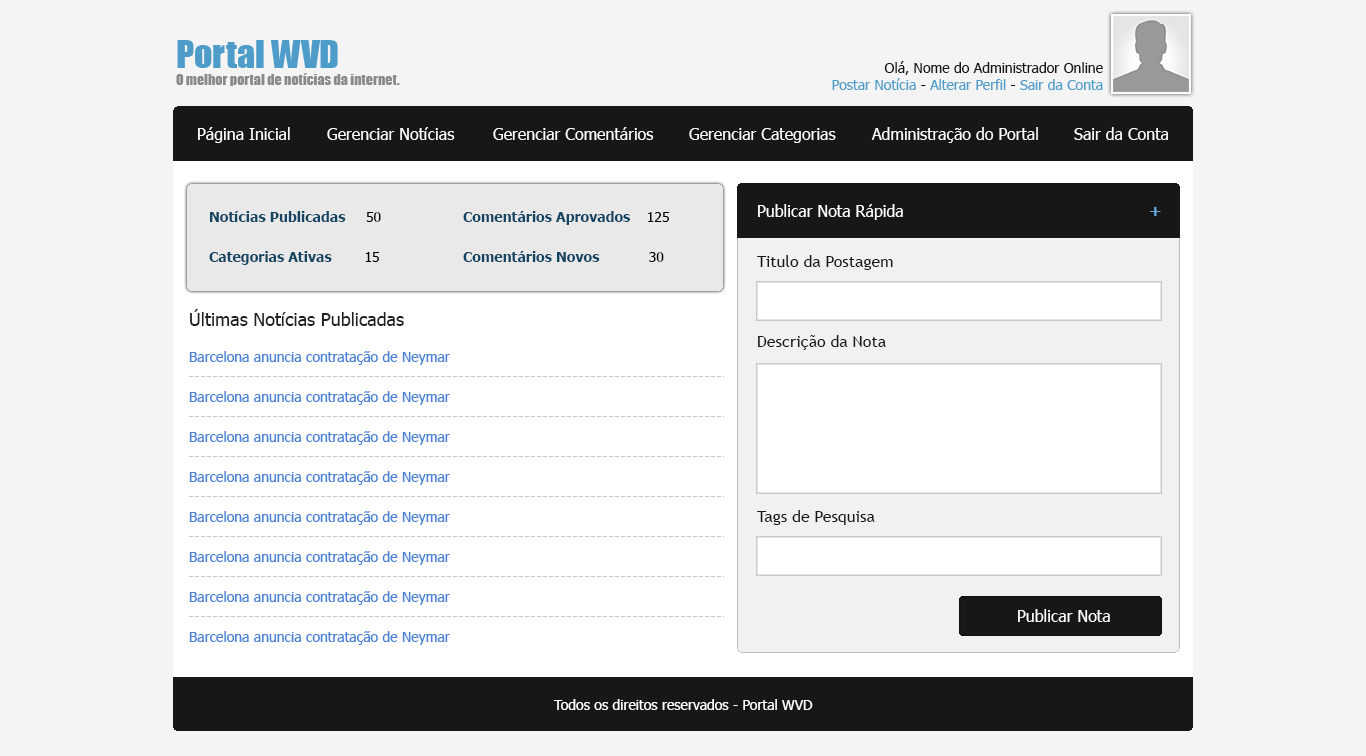
<style>
.page{position:relative;width:1366px;height:756px;background:#f4f4f4}
.page>*{position:absolute;margin:0}
.t1{font:14px "Tahoma";color:#171717}
.t2{font:14px "Tahoma";color:#4e9cc9}
.t3{font:14px "Tahoma";color:#000000}
.t4{font:16px "Tahoma";color:#ffffff}
.t5{font:16px "Tahoma-Bold";color:#64aade}
.t6{font:14px "Tahoma-Bold";color:#134562}
.t7{font:14px "Tahoma";color:#010101}
.t8{font:16px "TrebuchetMS";color:#171717}
.t9{font:18px "Tahoma";color:#202020}
.t10{font:14px "Tahoma";color:#ffffff}
</style>
<div class="page">
<p class="t1" style="left:832px;top:61px;width:271px;height:29px;text-align:right">Olá, Nome do Administrador Online<br><span class="t2">Postar Notícia </span><span class="t3">-</span><span class="t2"> Alterar Perfil </span><span class="t3">- </span><span class="t2">Sair da Conta</span></p>
<p class="t4" style="left:198px;top:127px;width:92px;height:16px">Página Inicial</p>
<p class="t4" style="left:327px;top:127px;width:128px;height:13px">Gerenciar Notícias</p>
<p class="t4" style="left:493px;top:127px;width:161px;height:13px">Gerenciar Comentários</p>
<p class="t4" style="left:689px;top:128px;width:147px;height:15px">Gerenciar Categorias</p>
<p class="t4" style="left:871px;top:127px;width:167px;height:16px">Administração do Portal</p>
<p class="t4" style="left:1074px;top:127px;width:94px;height:13px">Sair da Conta</p>
<p class="t4" style="left:758px;top:204px;width:403px;height:16px">Publicar Nota Rápida                                                 <span class="t5">+</span></p>
<p class="t6" style="left:210px;top:211px;width:171px;height:11px">Notícias Publicadas     <span class="t7">50</span></p>
<p class="t6" style="left:463px;top:211px;width:206px;height:14px">Comentários Aprovados    <span class="t3">125</span></p>
<p class="t6" style="left:209px;top:251px;width:170px;height:14px">Categorias Ativas        <span class="t3">15</span></p>
<p class="t6" style="left:463px;top:251px;width:201px;height:11px">Comentários Novos            <span class="t3">30</span></p>
<p class="t8" style="left:757px;top:255px;width:136px;height:15px">Titulo da Postagem</p>
<p class="t9" style="left:190px;top:309px;width:214px;height:17px">Últimas Notícias Publicadas</p>
<p class="t8" style="left:758px;top:335px;width:128px;height:15px">Descrição da Nota</p>
<p class="t8" style="left:757px;top:510px;width:118px;height:15px">Tags de Pesquisa</p>
<p class="t4" style="left:1018px;top:609px;width:92px;height:13px">Publicar Nota</p>
<p class="t10" style="left:553px;top:699px;width:260px;height:11px">Todos os direitos reservados - Portal WVD</p>
</div>
